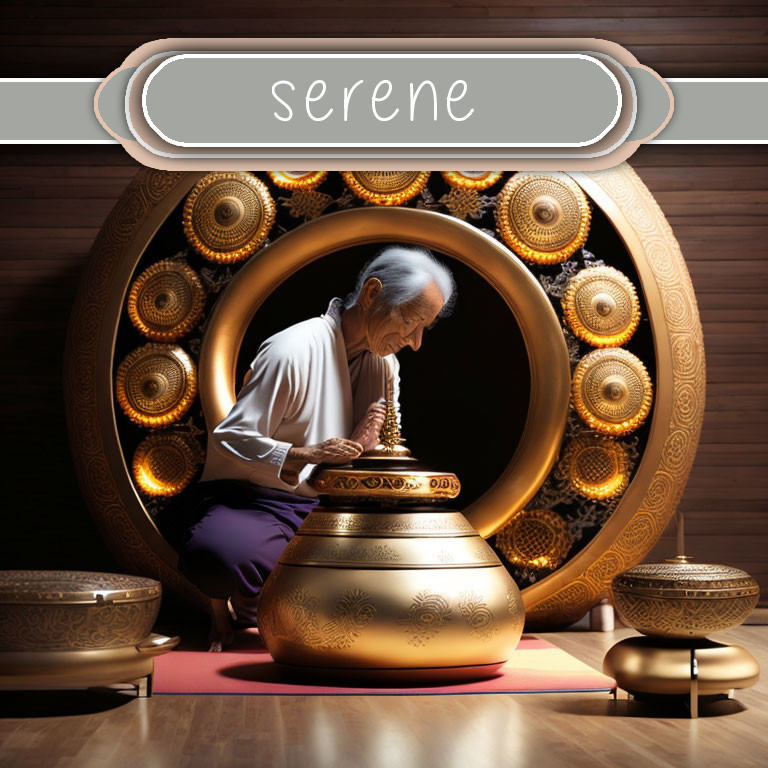
<style>
.page{position:relative;width:768px;height:768px}
.page>*{position:absolute;margin:0}
.t1{font:80px "A-little-sunshine";letter-spacing:0.1em;color:#ffffff}
</style>
<div class="page">
<p class="t1" style="left:272px;top:79px;width:202px;height:43px">serene</p>
</div>
